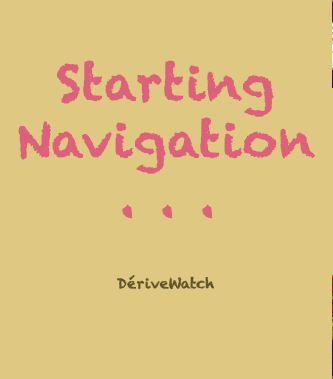
<style>
.page{position:relative;width:333px;height:379px;background:#dfc882}
.page>*{position:absolute;margin:0}
.t1{font:48px "Chalkduster";color:#dd617b;font-weight:bold}
.t2{font:14px "Chalkduster";color:#63552b;font-weight:bold}
</style>
<div class="page">
<p class="t1" style="left:18px;top:60px;width:297px;height:230px;text-align:center">Starting Navigation<br>. . .<br><br><span class="t2">DériveWatch</span></p>
</div>
